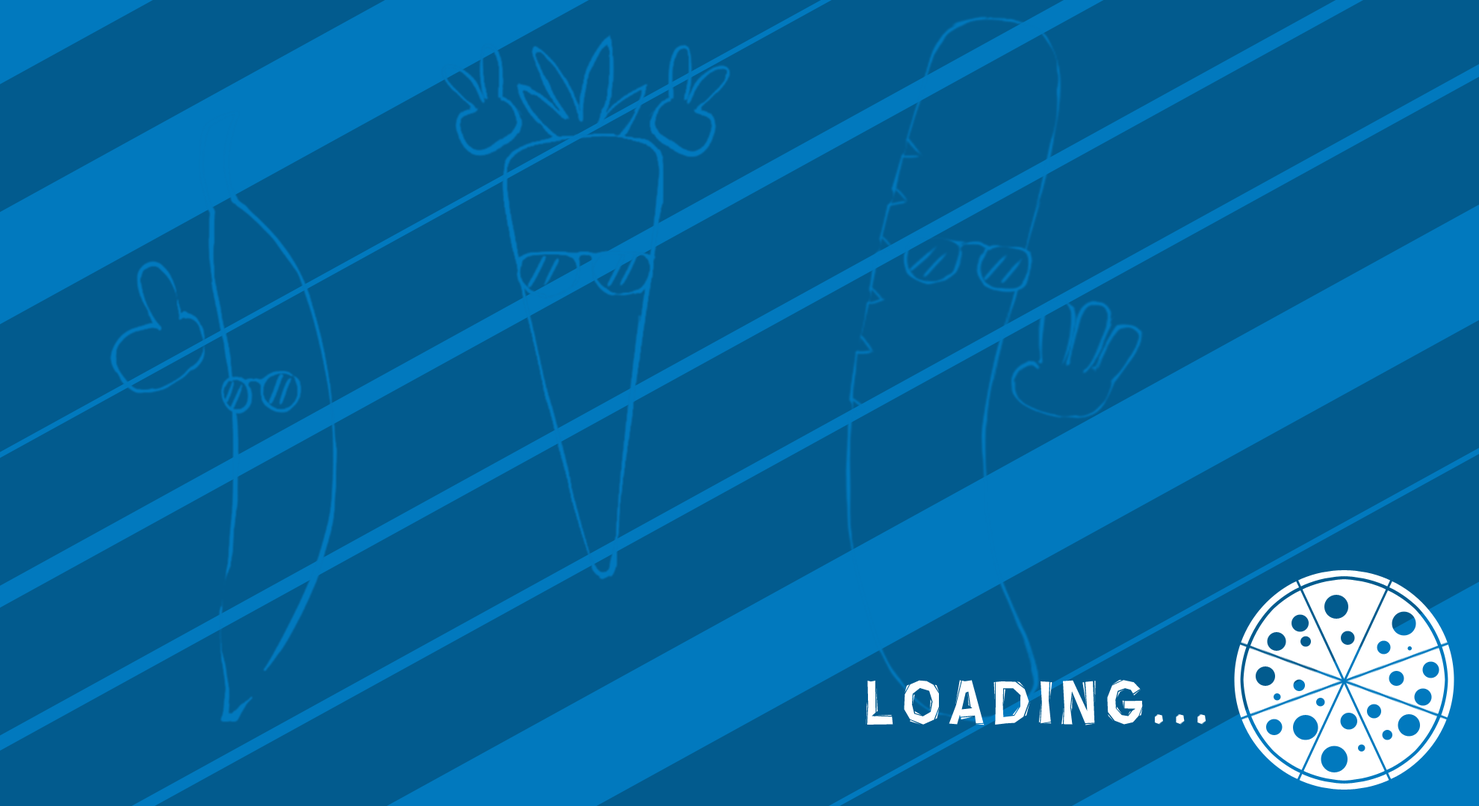
<style>
.page{position:relative;width:1479px;height:806px;background:#025b8e}
.page>*{position:absolute;margin:0}
.t1{font:74.7px "BlueHighwayLinocut";letter-spacing:0.1em;color:#ffffff}
</style>
<div class="page">
<p class="t1" style="left:865px;top:680px;width:341px;height:46px">LOADING...</p>
</div>
